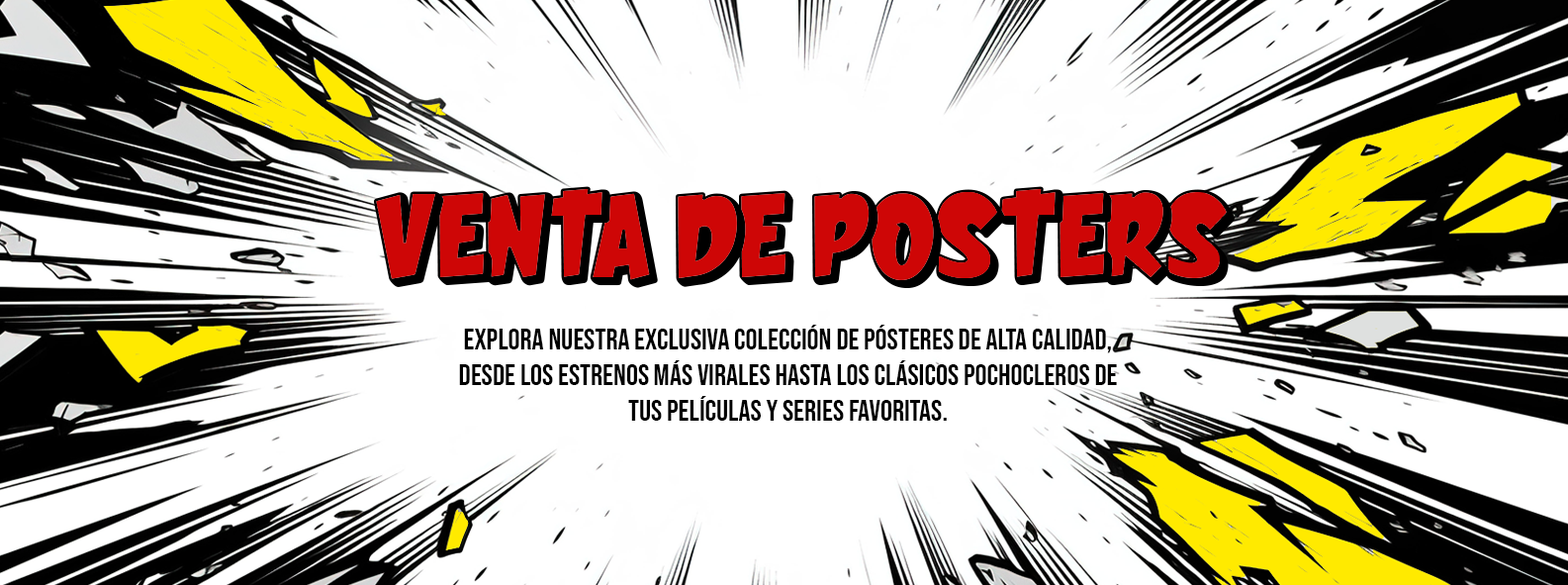
<style>
.page{position:relative;width:1568px;height:585px;background:#ffffff}
.page>*{position:absolute;margin:0}
.t1{font:29.7px "BebasNeue-Regular";color:#000000}
</style>
<div class="page">
<p class="t1" style="left:459px;top:324px;width:658px;height:96px;text-align:center">Explora nuestra exclusiva colección de pósteres de alta calidad, desde los estrenos más virales HASTA LOS CLÁSICOS POCHOCLEROS de tus PELÍCULAS Y SERIES favoritas.</p>
</div>
